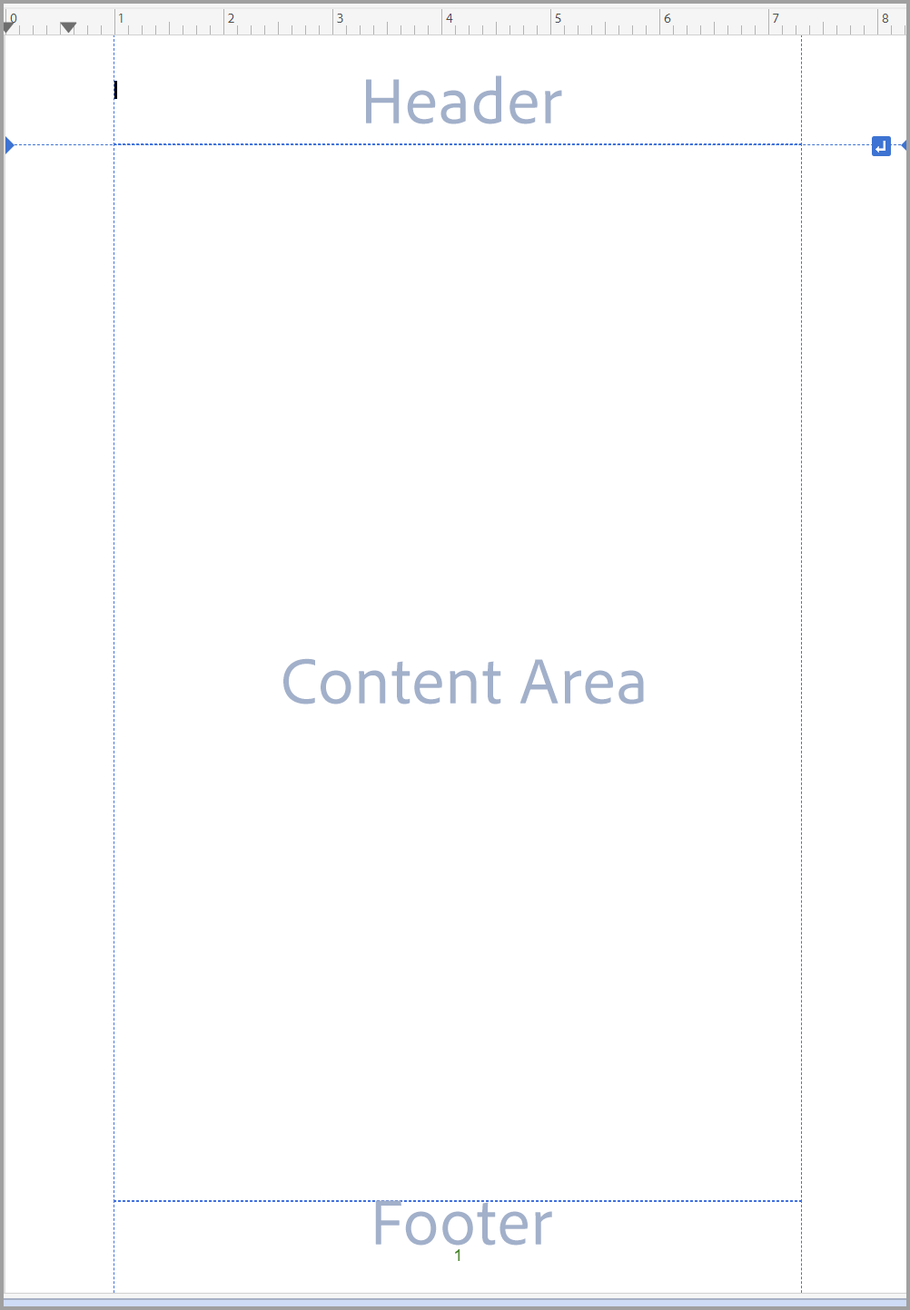
<style>
.page{position:relative;width:910px;height:1310px;background:#ffffff}
.page>*{position:absolute;margin:0}
.t1{font:66.3px "AdobeClean-Regular";letter-spacing:0.02em;color:#a2b0ca}
</style>
<div class="page">
<p class="t1" style="left:366px;top:75px;width:196px;height:49px">Header</p>
<p class="t1" style="left:283px;top:658px;width:361px;height:47px">Content Area</p>
<p class="t1" style="left:375px;top:1201px;width:177px;height:45px">Footer</p>
</div>
